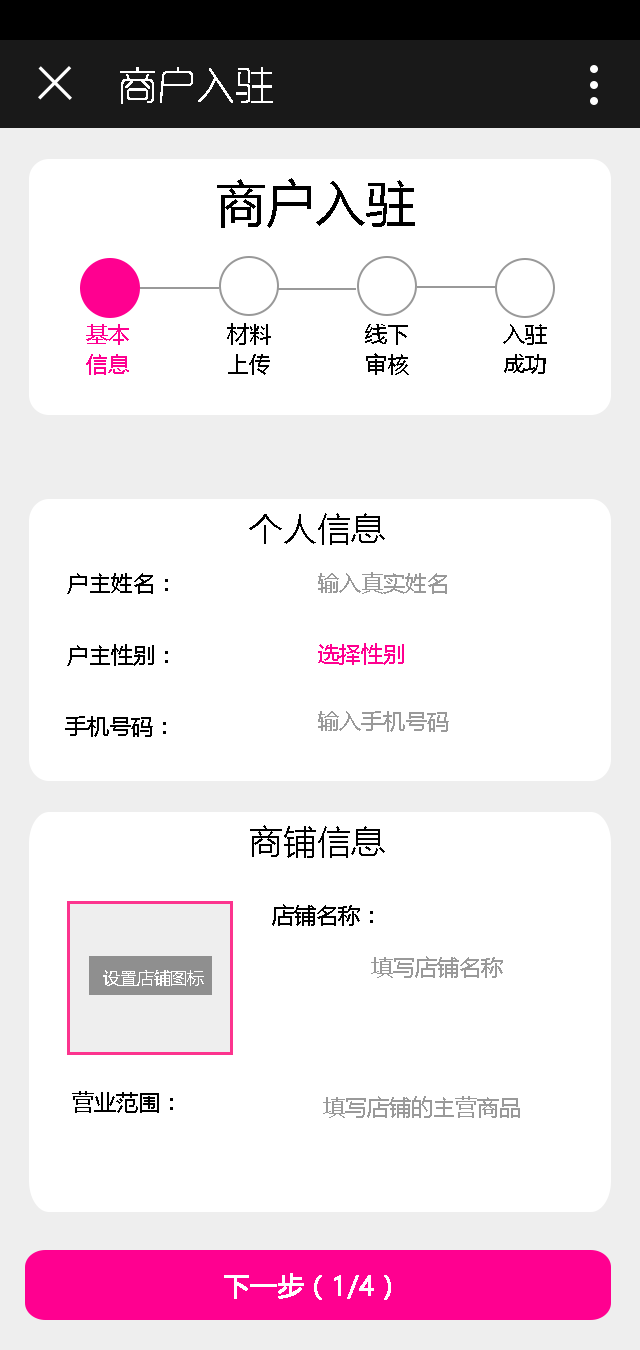
<style>
.page{position:relative;width:640px;height:1350px;background:#ffffff}
.page>*{position:absolute;margin:0}
.t1{font:38px "RTWSYueGoG0v1-ExLight";color:#ffffff;font-weight:bold}
.t2{font:50px "MicrosoftYaHei";color:#000000}
.t3{font:22px/30px "MicrosoftYaHei";color:#ff0090}
.t4{font:22px/30px "MicrosoftYaHei";color:#000000}
.t5{font:34px "MicrosoftYaHei";color:#000000}
.t6{font:22px "MicrosoftYaHei";color:#000000}
.t7{font:22px "MicrosoftYaHei";color:#999999}
.t8{font:22px "MicrosoftYaHei";color:#ff0090}
.t9{font:16.7px "MicrosoftYaHei";color:#ffffff}
.t10{font:26px "MicrosoftYaHei";color:#ffffff;font-weight:bold}
</style>
<div class="page">
<p class="t1" style="left:120px;top:67px;width:153px;height:37px">商户入驻</p>
<p class="t2" style="left:217px;top:178px;width:198px;height:50px">商户入驻</p>
<p class="t3" style="left:86px;top:324px;width:43px;height:51px">基本<br>信息</p>
<p class="t4" style="left:227px;top:323px;width:44px;height:52px">材料<br>上传</p>
<p class="t4" style="left:365px;top:324px;width:44px;height:51px">线下<br>审核</p>
<p class="t4" style="left:503px;top:324px;width:44px;height:50px">入驻<br>成功</p>
<p class="t5" style="left:249px;top:513px;width:136px;height:32px">个人信息</p>
<p class="t6" style="left:67px;top:573px;width:101px;height:21px">户主姓名：</p>
<p class="t7" style="left:318px;top:572px;width:129px;height:22px">输入真实姓名</p>
<p class="t6" style="left:67px;top:644px;width:101px;height:22px">户主性别：</p>
<p class="t8" style="left:318px;top:643px;width:86px;height:22px">选择性别</p>
<p class="t7" style="left:318px;top:711px;width:131px;height:21px">输入手机号码</p>
<p class="t6" style="left:65px;top:716px;width:101px;height:21px">手机号码：</p>
<p class="t5" style="left:250px;top:825px;width:135px;height:33px">商铺信息</p>
<p class="t6" style="left:272px;top:904px;width:101px;height:22px">店铺名称：</p>
<p class="t7" style="left:371px;top:956px;width:132px;height:22px">填写店铺名称</p>
<p class="t9" style="left:103px;top:970px;width:101px;height:16px">设置店铺图标</p>
<p class="t6" style="left:72px;top:1091px;width:101px;height:22px">营业范围：</p>
<p class="t7" style="left:323px;top:1096px;width:197px;height:22px">填写店铺的主营商品</p>
<p class="t10" style="left:224px;top:1273px;width:167px;height:27px">下一步（1/4）</p>
</div>
